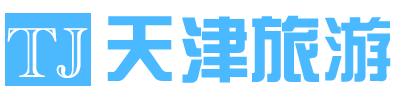
<style>
.page{position:relative;width:400px;height:100px;background:#ffffff}
.page>*{position:absolute;margin:0}
.t1{font:73px "JZhongYi";color:#4bb9ff}
.t2{font:73px "AcademyEngravedLetPlain";color:#ffffff}
</style>
<div class="page">
<p class="t1" style="left:107px;top:15px;width:284px;height:68px">天津旅游</p>
<p class="t2" style="left:7px;top:28px;width:81px;height:50px">TJ</p>
</div>
